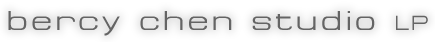
<style>
.page{position:relative;width:435px;height:42px;background:#ffffff}
.page>*{position:absolute;margin:0}
.t1{font:24px "SpaceOut";letter-spacing:0.2em;color:#646464}
.t2{font:18px "SpaceOut";letter-spacing:0.2em;color:#646464}
</style>
<div class="page">
<p class="t1" style="left:8px;top:11px;width:420px;height:25px">bercy chen studio <span class="t2">LP</span></p>
</div>
